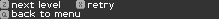
<style>
.page{position:relative;width:219px;height:19px;background:#333333}
.page>*{position:absolute;margin:0}
.t1{font:8px "PFTempestaSeven";color:#ffffff}
</style>
<div class="page">
<p class="t1" style="left:12px;top:1px;width:48px;height:7px">next level</p>
<p class="t1" style="left:88px;top:2px;width:26px;height:8px">retry</p>
<p class="t1" style="left:12px;top:10px;width:68px;height:7px">back to menu</p>
</div>
